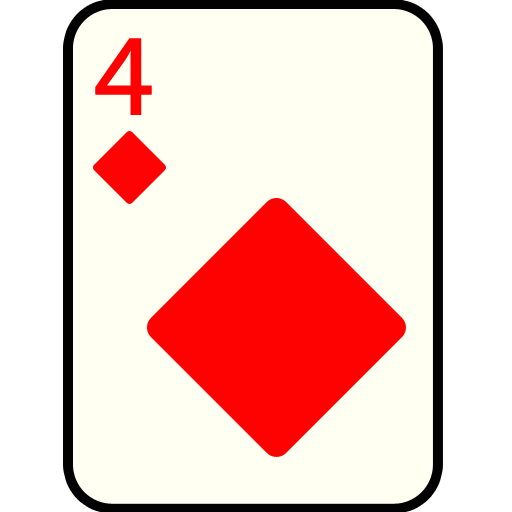
<style>
.page{position:relative;width:512px;height:512px;background:#fffff2}
.page>*{position:absolute;margin:0}
.t1{font:200px "MyriadPro-Regular";letter-spacing:-0.05em;color:#fd0202;font-variant:small-caps;font-weight:bold}
</style>
<div class="page">
<p class="t1" style="left:95px;top:38px;width:57px;height:77px">4</p>
</div>
